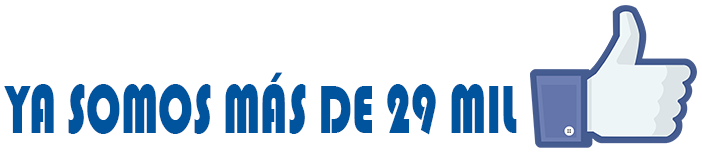
<style>
.page{position:relative;width:702px;height:154px;background:#ffffff}
.page>*{position:absolute;margin:0}
.t1{font:71.5px "Bauhaus93";color:#00549e;scale:0.64 1}
</style>
<div class="page">
<p class="t1" style="left:4px;top:72px;width:513px;height:63px">YA SOMOS MÁS DE 29 MIL</p>
</div>
